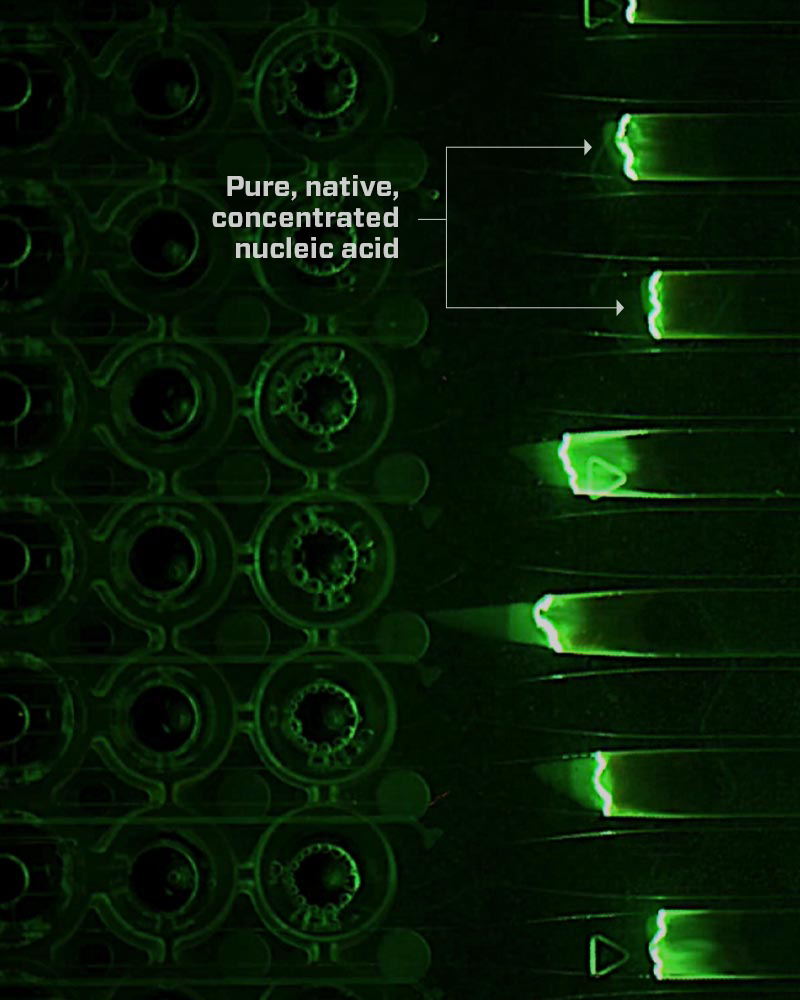
<style>
.page{position:relative;width:800px;height:1000px}
.page>*{position:absolute;margin:0}
.t1{font:28px/31px "Forza-Bold";color:#cccdcb}
</style>
<div class="page">
<p class="t1" style="left:212px;top:175px;width:186px;height:83px;text-align:right">Pure, native, <br>concentrated <br>nucleic acid</p>
</div>
